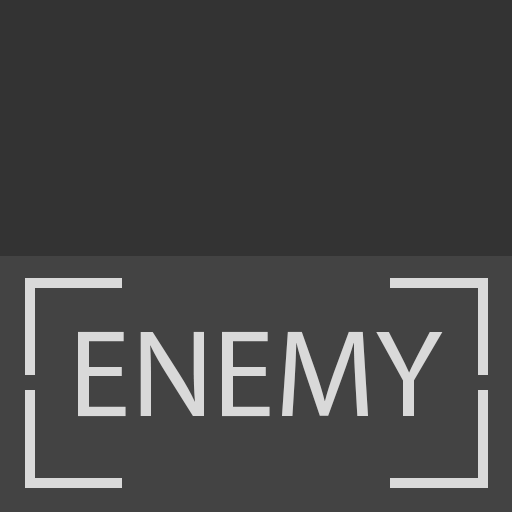
<style>
.page{position:relative;width:512px;height:512px;background:#333333}
.page>*{position:absolute;margin:0}
.t1{font:125px "MyriadPro-Regular";color:#d9d9d9}
</style>
<div class="page">
<p class="t1" style="left:78px;top:331px;width:365px;height:86px">ENEMY</p>
</div>
